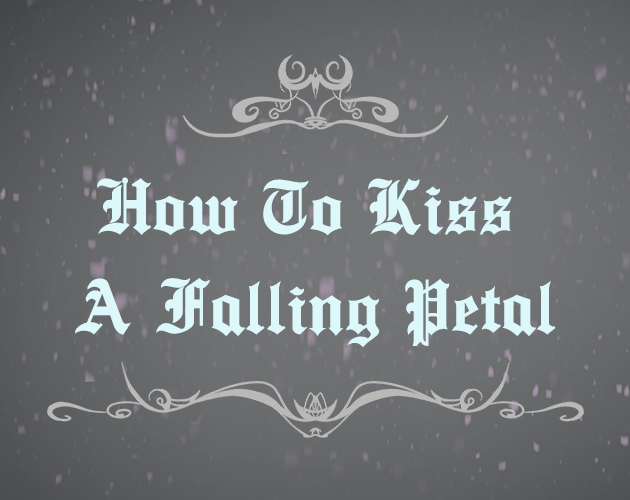
<style>
.page{position:relative;width:630px;height:500px}
.page>*{position:absolute;margin:0}
.t1{font:83.3px/100px "Ancient-Medium";letter-spacing:0.012em;color:#ddf8fb}
</style>
<div class="page">
<p class="t1" style="left:75px;top:177px;width:481px;height:170px;text-align:center">How To Kiss <br>A Falling Petal</p>
</div>
